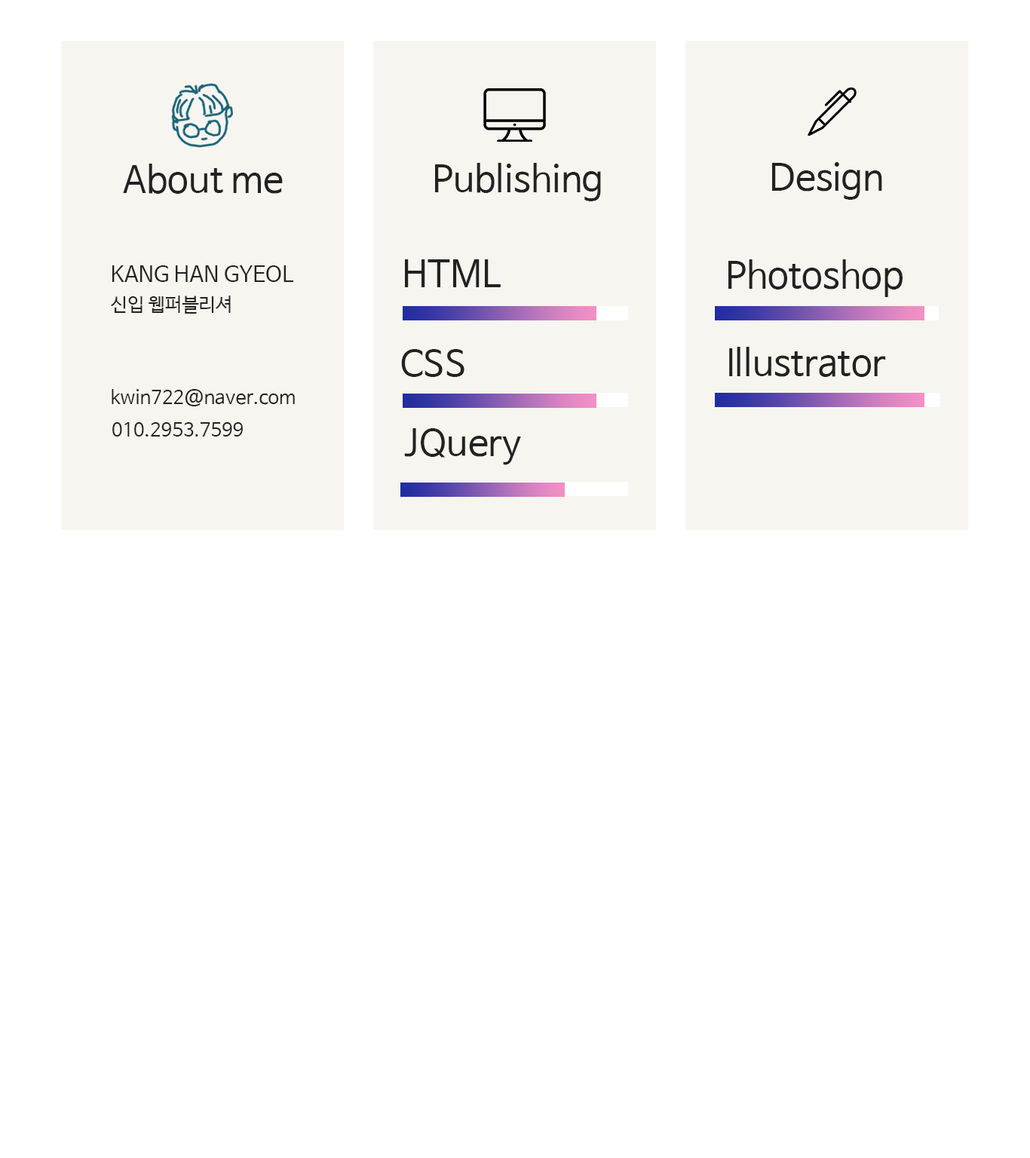
<style>
.page{position:relative;width:1030px;height:1158px;background:#ffffff}
.page>*{position:absolute;margin:0}
.t1{font:36.2px "NanumBarunGothic";color:#222222}
.t2{font:21.7px "NanumBarunGothic";color:#222222}
.t3{font:18.8px "NanumBarunGothic";color:#222222}
</style>
<div class="page">
<p class="t1" style="left:123px;top:164px;width:160px;height:30px">About me</p>
<p class="t1" style="left:435px;top:163px;width:166px;height:38px">Publishing</p>
<p class="t1" style="left:772px;top:162px;width:110px;height:38px">Design</p>
<p class="t2" style="left:112px;top:265px;width:181px;height:17px">KANG HAN GYEOL</p>
<p class="t1" style="left:405px;top:259px;width:96px;height:28px">HTML</p>
<p class="t1" style="left:728px;top:259px;width:174px;height:38px">Photoshop</p>
<p class="t3" style="left:111px;top:296px;width:120px;height:18px">신입 웹퍼블리셔</p>
<p class="t1" style="left:401px;top:349px;width:63px;height:28px">CSS</p>
<p class="t1" style="left:729px;top:347px;width:157px;height:30px">Illustrator</p>
<p class="t3" style="left:112px;top:389px;width:183px;height:17px">kwin722@naver.com</p>
<p class="t3" style="left:112px;top:422px;width:131px;height:14px">010.2953.7599</p>
<p class="t1" style="left:404px;top:428px;width:117px;height:37px">JQuery</p>
</div>
